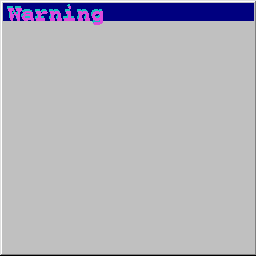
<style>
.page{position:relative;width:256px;height:256px;background:#c0c0c0}
.page>*{position:absolute;margin:0}
.t1{font:23px "Courier-Bold"}
.t2{font:23px "Courier-Bold";color:#dd4bdb}
</style>
<div class="page">
<p class="t1" style="left:7px;top:4px;width:95px;height:19px">Warning</p>
<p class="t2" style="left:8px;top:6px;width:95px;height:19px">Warning</p>
</div>
